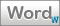
<style>
.page{position:relative;width:60px;height:26px}
.page>*{position:absolute;margin:0}
.t1{font:17.7px "ArialRoundedMTBold";color:#7b7b7b}
</style>
<div class="page">
<p class="t1" style="left:7px;top:6px;width:45px;height:13px">Word</p>
<p class="t1" style="left:7px;top:6px;width:45px;height:13px">Word</p>
</div>
